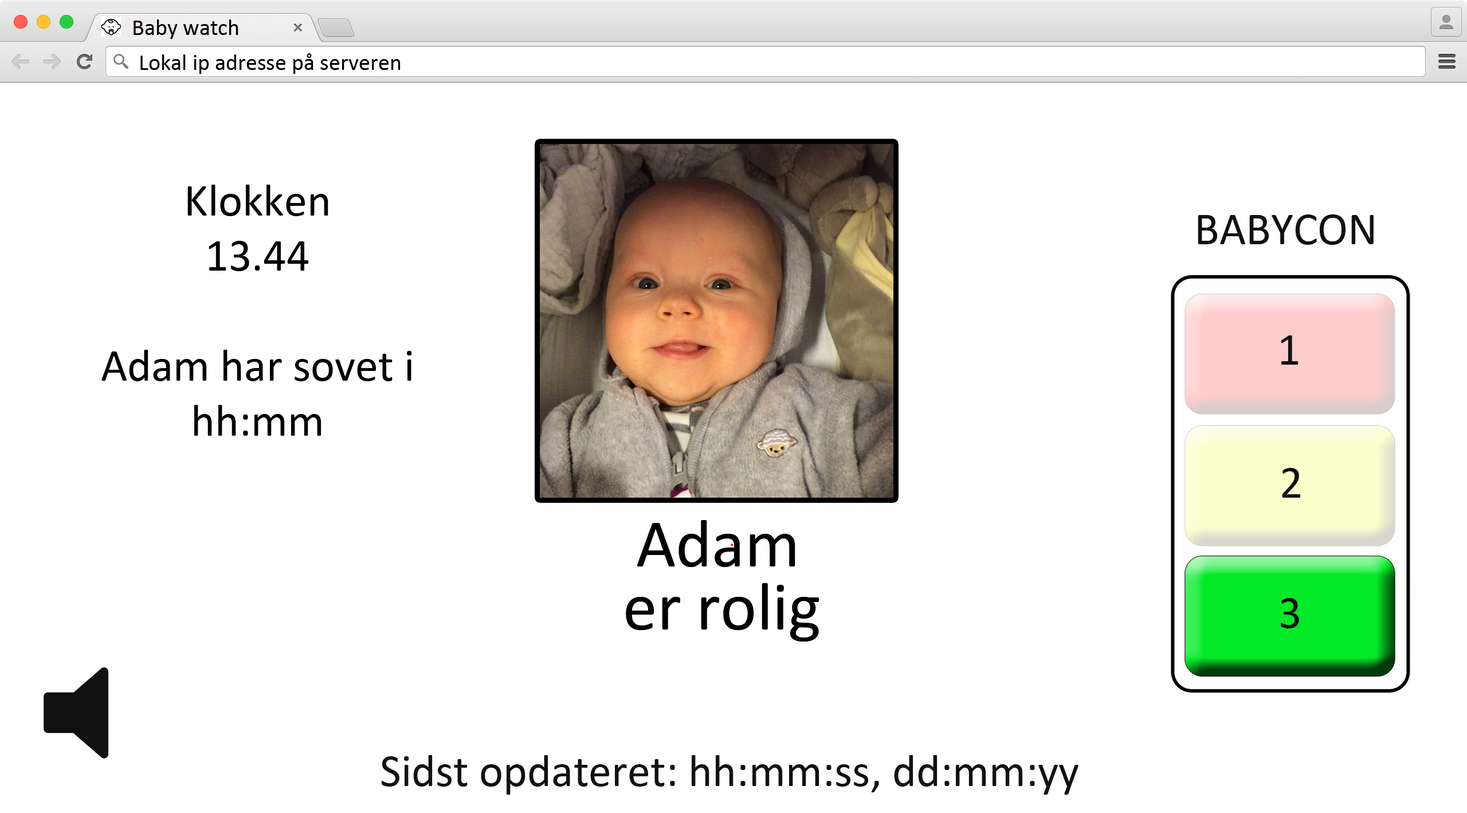
<style>
.page{position:relative;width:1467px;height:813px;background:#ffffff}
.page>*{position:absolute;margin:0}
.t1{font:22.9px "Calibri";color:#000000}
.t2{font:45.9px "Calibri";color:#000000}
.t3{font:45.9px "Calibri";color:#111111}
.t4{font:68.8px "Calibri";color:#000000}
</style>
<div class="page">
<p class="t1" style="left:134px;top:19px;width:104px;height:20px">Baby watch</p>
<p class="t1" style="left:140px;top:53px;width:261px;height:21px">Lokal ip adresse på serveren</p>
<p class="t2" style="left:101px;top:185px;width:311px;height:251px;text-align:center">Klokken<br>13.44<br><br>Adam har sovet i<br>hh:mm</p>
<p class="t3" style="left:1198px;top:214px;width:176px;height:31px">BABYCON</p>
<p class="t3" style="left:1281px;top:335px;width:18px;height:30px">1</p>
<p class="t3" style="left:1282px;top:468px;width:19px;height:29px">2</p>
<p class="t4" style="left:637px;top:520px;width:159px;height:47px">Adam</p>
<p class="t4" style="left:626px;top:583px;width:194px;height:58px">er rolig</p>
<p class="t3" style="left:1281px;top:598px;width:18px;height:30px">3</p>
<p class="t3" style="left:381px;top:755px;width:698px;height:39px">Sidst opdateret: hh:mm:ss, dd:mm:yy</p>
</div>
